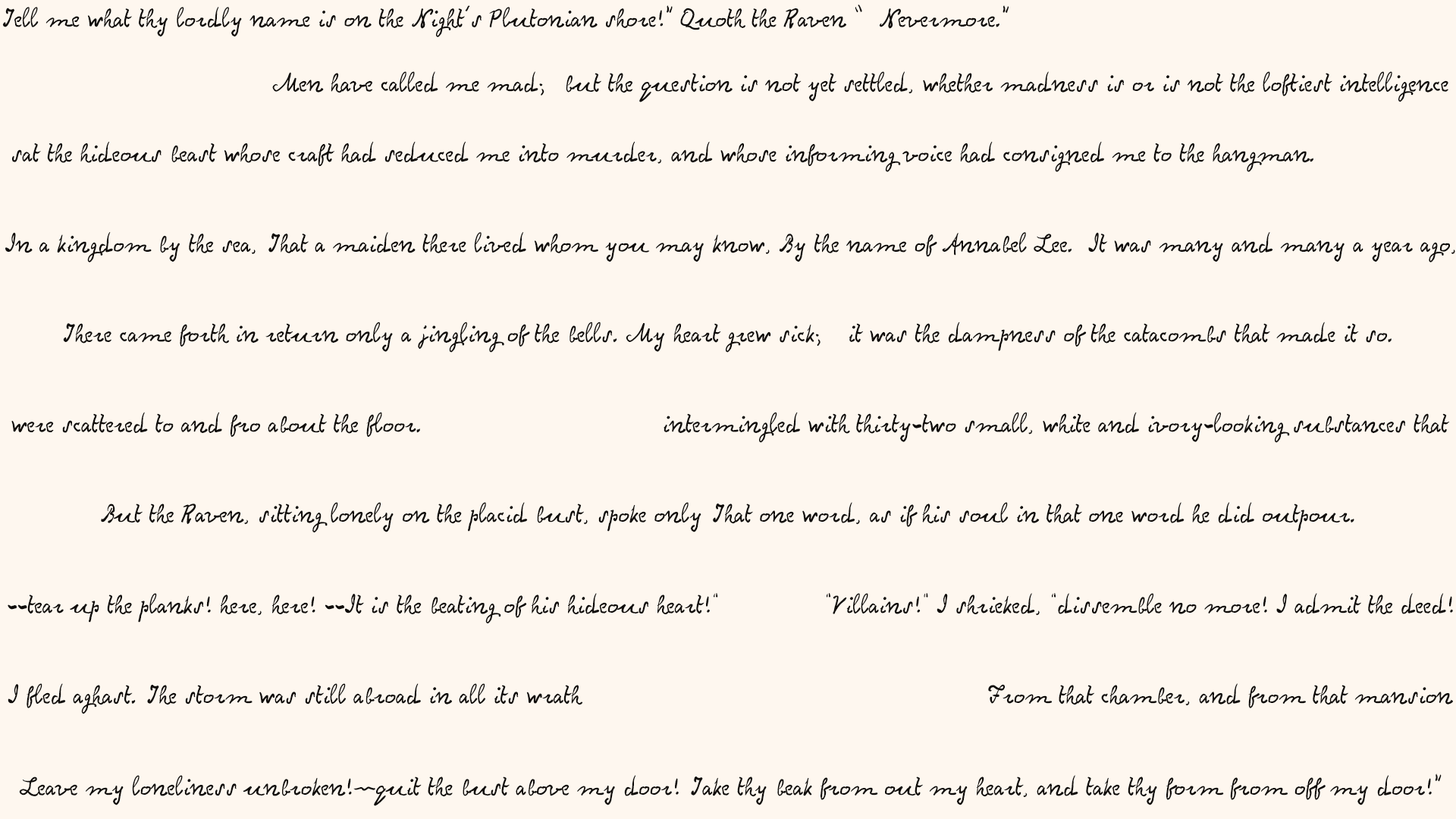
<style>
.page{position:relative;width:1456px;height:819px;background:#fef7ef}
.page>*{position:absolute;margin:0}
.t1{font:25.3px "PoeNevermore";letter-spacing:0.01em;color:#0f0c0a}
</style>
<div class="page">
<p class="t1" style="left:2px;top:5px;width:1007px;height:32px">Tell me what thy lordly name is on the Night’s Plutonian shore!” Quoth the Raven “Nevermore.”</p>
<p class="t1" style="left:272px;top:71px;width:1176px;height:31px">Men have called me mad;but the question is not yet settled, whether madness is or is not the loftiest intelligence</p>
<p class="t1" style="left:12px;top:141px;width:1301px;height:31px">sat the hideous beast whose craft had seduced me into murder, and whose informing voice had consigned me to the hangman.</p>
<p class="t1" style="left:5px;top:232px;width:1450px;height:30px">In a kingdom by the sea, That a maiden there lived whom you may know, By the name of Annabel Lee.  It was many and many a year ago,</p>
<p class="t1" style="left:63px;top:322px;width:1329px;height:31px">There came forth in return only a jingling of the bells. My heart grew sick; it was the dampness of the catacombs that made it so.</p>
<p class="t1" style="left:11px;top:412px;width:1439px;height:31px">were scattered to and fro about the floor.                                intermingled with thirty-two small, white and ivory-looking substances that</p>
<p class="t1" style="left:101px;top:502px;width:1253px;height:31px">But the Raven, sitting lonely on the placid bust, spoke only That one word, as if his soul in that one word he did outpour.</p>
<p class="t1" style="left:8px;top:593px;width:1445px;height:30px">--tear up the planks! here, here! --It is the beating of his hideous heart!"              "Villains!" I shrieked, "dissemble no more! I admit the deed!</p>
<p class="t1" style="left:8px;top:683px;width:1445px;height:31px">I fled aghast. The storm was still abroad in all its wrath                                                      From that chamber, and from that mansion</p>
<p class="t1" style="left:19px;top:773px;width:1423px;height:33px">Leave my loneliness unbroken!—quit the bust above my door! Take thy beak from out my heart, and take thy form from off my door!”</p>
</div>
